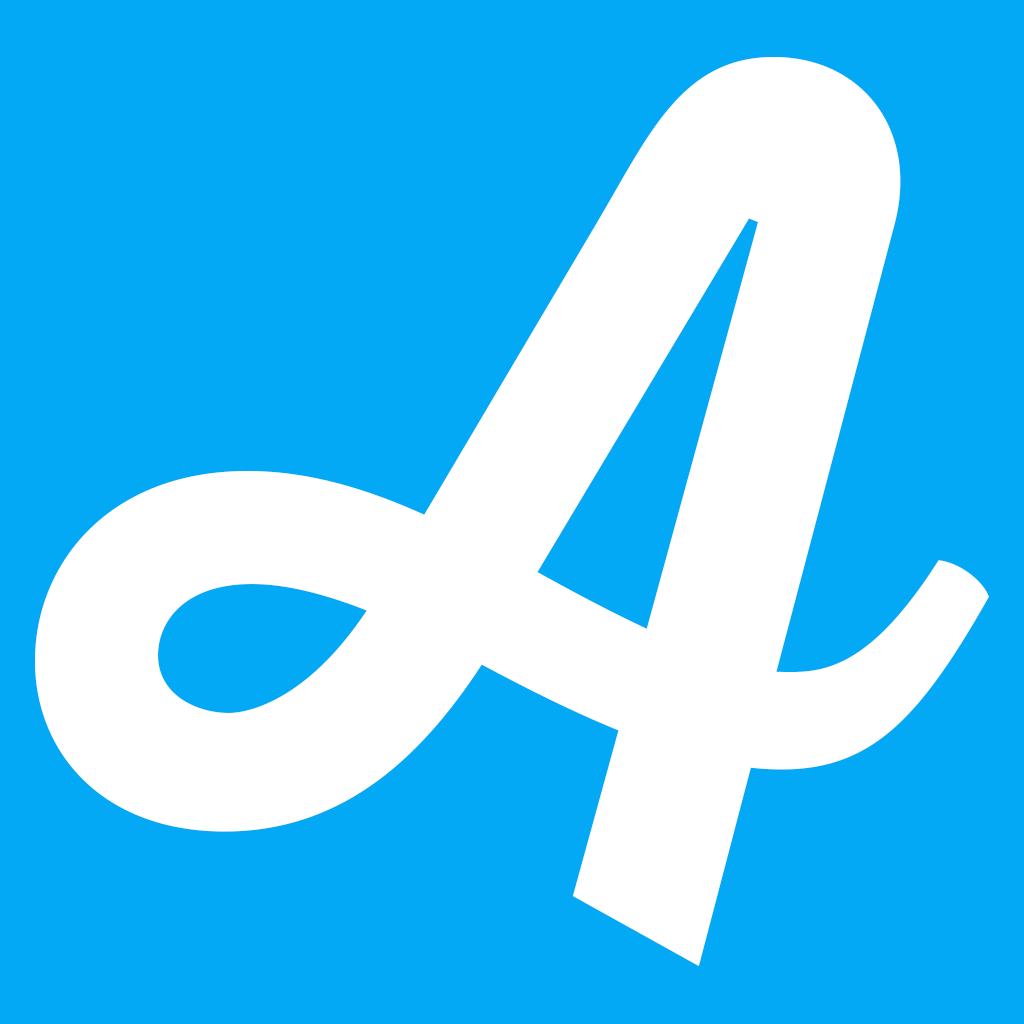
<style>
.page{position:relative;width:1024px;height:1024px;background:#03a9f4}
.page>*{position:absolute;margin:0}
.t1{font:912px "ThirstyScriptExtraboldDemo";color:#ffffff}
</style>
<div class="page">
<p class="t1" style="left:35px;top:57px;width:954px;height:909px">A</p>
</div>
